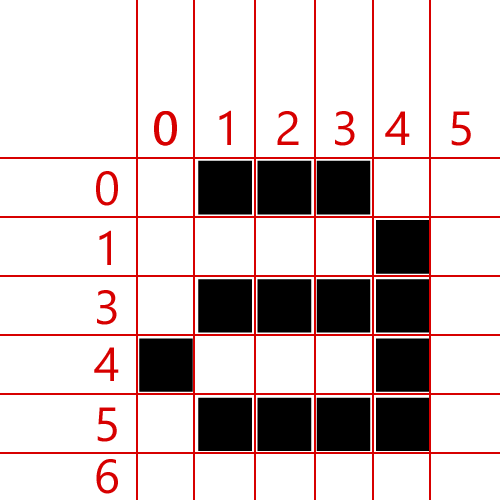
<style>
.page{position:relative;width:500px;height:500px;background:#ffffff}
.page>*{position:absolute;margin:0}
.t1{font:48px "SegoeUI";color:#d70000}
.t2{font:592px "AlphaSmart3000";color:#000000}
</style>
<div class="page">
<p class="t1" style="left:154px;top:111px;width:22px;height:35px">0</p>
<p class="t1" style="left:155px;top:111px;width:22px;height:35px">0</p>
<p class="t1" style="left:219px;top:110px;width:12px;height:35px">1</p>
<p class="t1" style="left:277px;top:111px;width:22px;height:34px">2</p>
<p class="t1" style="left:335px;top:111px;width:20px;height:35px">3</p>
<p class="t1" style="left:385px;top:111px;width:25px;height:34px">4</p>
<p class="t1" style="left:451px;top:111px;width:20px;height:35px">5</p>
<p class="t2" style="left:139px;top:160px;width:291px;height:291px">a</p>
<p class="t1" style="left:96px;top:171px;width:22px;height:35px">0</p>
<p class="t1" style="left:99px;top:230px;width:12px;height:35px">1</p>
<p class="t1" style="left:97px;top:290px;width:20px;height:35px">3</p>
<p class="t1" style="left:94px;top:347px;width:25px;height:34px">4</p>
<p class="t1" style="left:97px;top:407px;width:20px;height:35px">5</p>
<p class="t1" style="left:96px;top:459px;width:22px;height:35px">6</p>
</div>
